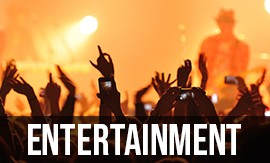
<style>
.page{position:relative;width:270px;height:163px}
.page>*{position:absolute;margin:0}
.t1{font:43.8px "BebasNeue-Regular";color:#ffffff}
</style>
<div class="page">
<p class="t1" style="left:28px;top:124px;width:213px;height:31px">Entertainment</p>
</div>
